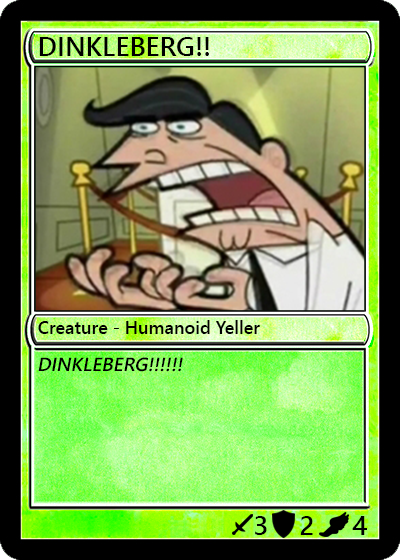
<style>
.page{position:relative;width:400px;height:560px}
.page>*{position:absolute;margin:0}
.t1{font:27px "YuGothicUI-Semibold";color:#000000}
.t2{font:18px "YuGothicUI-Semibold";color:#000000}
.t3{font:19px "YuGothicUI-Semibold";color:#000000;font-style:italic}
</style>
<div class="page">
<p class="t1" style="left:39px;top:37px;width:170px;height:19px">DINKLEBERG!!</p>
<p class="t2" style="left:38px;top:320px;width:222px;height:14px">Creature - Humanoid Yeller</p>
<p class="t3" style="left:38px;top:357px;width:145px;height:15px">DINKLEBERG!!!!!!</p>
<p class="t1" style="left:255px;top:516px;width:12px;height:19px">3</p>
<p class="t1" style="left:300px;top:516px;width:13px;height:19px">2</p>
<p class="t1" style="left:352px;top:516px;width:15px;height:19px">4</p>
</div>
